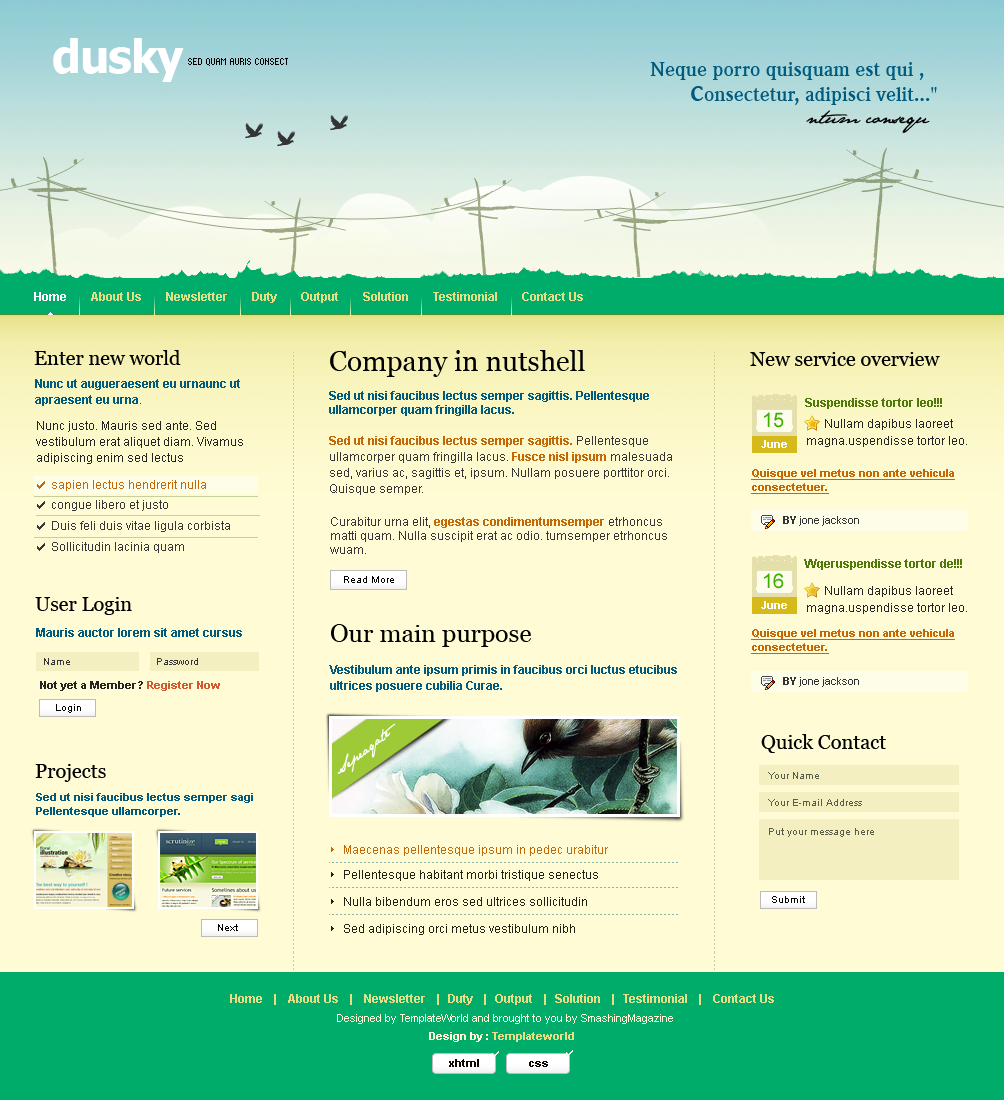
<style>
.page{position:relative;width:1004px;height:1100px;background:#fffcd5}
.page>*{position:absolute;margin:0}
.t1{font:46px "Tahoma-Bold";letter-spacing:-0.025em;color:#ffffff}
.t2{font:8px "Standard0757";color:#000000;text-transform:uppercase}
.t3{font:20px "WeidemannITCbyBT-Bold";color:#005b7f}
.t4{font:30px "WeidemannITCbyBT-Bold";color:#005b7f}
.t5{font:18px "JaneAusten";color:#000000}
.t6{font:12px "Arial-BoldMT";color:#e5df85}
.t7{font:12px "Arial-BoldMT";color:#ffffff}
.t8{font:20px "Georgia";color:#000000}
.t9{font:28px "Georgia";color:#000000}
.t10{font:12px/16px "Arial-BoldMT";color:#005b7f}
.t11{font:12px/16px "ArialMT";color:#005b7f}
.t12{font:12px/14px "Arial-BoldMT";color:#005b7f}
.t13{font:12px "Arial-BoldMT";color:#4f790a}
.t14{font:20px "ArialMT";color:#3bb000}
.t15{font:12px/16px "ArialMT";color:#252525}
.t16{font:12px/17px "ArialMT";color:#252525}
.t17{font:12px/16px "ArialMT";color:#363636}
.t18{font:12px/16px "Arial-BoldMT";color:#c46706}
.t19{font:11px "Arial-BoldMT";color:#ffffff}
.t20{font:11px/14px "Arial-BoldMT";color:#c46706;text-decoration:underline}
.t21{font:12px "ArialMT";color:#c46706}
.t22{font:12px "ArialMT";color:#363636}
.t23{font:12px/14px "ArialMT";color:#363636}
.t24{font:12px/14px "Arial-BoldMT";color:#c46706}
.t25{font:11px "ArialMT";color:#343434}
.t26{font:11px "Arial-BoldMT";color:#343434}
.t27{font:10px "ArialMT";color:#000000}
.t28{font:12px "Arial-BoldMT";color:#005b7f}
.t29{font:25px "Georgia";color:#000000}
.t30{font:10px "ArialMT";color:#363636}
.t31{font:11px "Arial-BoldMT";color:#252525}
.t32{font:11px "Arial-BoldMT";color:#d25930}
.t33{font:13px "JaneAusten";color:#ffffff;font-weight:bold}
.t34{font:10px "ArialMT";color:#585e4c}
.t35{font:11px/14px "Arial-BoldMT";color:#005b7f}
.t36{font:12px "ArialMT";color:#1e2316}
.t37{font:11px "Tahoma-Bold";color:#e5df85}
.t38{font:11px "ArialMT";color:#fffcd5}
.t39{font:11px "Arial-BoldMT";color:#e5df85}
.t40{font:11px "Arial-BoldMT";color:#fffcd5}
.t41{font:11px "Arial-BoldMT";color:#100703}
</style>
<div class="page">
<p class="t1" style="left:53px;top:38px;width:131px;height:44px">dusky</p>
<p class="t2" style="left:188px;top:58px;width:100px;height:8px">sed quam auris consect</p>
<p class="t3" style="left:650px;top:62px;width:274px;height:18px">Neque porro quisquam est qui ,</p>
<p class="t3" style="left:691px;top:86px;width:246px;height:19px"><span class="t4">c</span>onsectetur, adipisci velit..."</p>
<p class="t5" style="left:806px;top:110px;width:124px;height:23px">ntum consequ</p>
<p class="t6" style="left:34px;top:292px;width:549px;height:11px"><span class="t7">Home       </span> About Us        Newsletter        Duty        Output        Solution        Testimonial        Contact Us</p>
<p class="t8" style="left:34px;top:350px;width:147px;height:15px">Enter new world</p>
<p class="t9" style="left:330px;top:350px;width:255px;height:27px">Company in nutshell</p>
<p class="t8" style="left:750px;top:352px;width:190px;height:14px">New service overview</p>
<p class="t10" style="left:35px;top:379px;width:205px;height:27px">Nunc ut augueraesent eu urnaunc ut apraesent eu urna<span class="t11">.</span></p>
<p class="t12" style="left:329px;top:391px;width:320px;height:25px">Sed ut nisi faucibus lectus semper sagittis. Pellentesque ullamcorper quam fringilla lacus.</p>
<p class="t13" style="left:805px;top:398px;width:137px;height:11px">Suspendisse tortor leo!!!</p>
<p class="t14" style="left:764px;top:412px;width:20px;height:16px">15</p>
<p class="t15" style="left:36px;top:421px;width:207px;height:43px">Nunc justo. Mauris sed ante. Sed vestibulum erat aliquet diam. Vivamus adipiscing enim sed lectus</p>
<p class="t16" style="left:807px;top:419px;width:160px;height:28px">Nullam dapibus laoreet magna.uspendisse tortor leo.</p>
<p class="t17" style="left:329px;top:436px;width:343px;height:59px"><span class="t18">Sed ut nisi faucibus lectus semper sagittis.</span> Pellentesque ullamcorper quam fringilla lacus. <span class="t18">Fusce nisl ipsum</span> malesuada sed, varius ac, sagittis et, ipsum. Nullam posuere porttitor orci. Quisque semper.</p>
<p class="t19" style="left:761px;top:440px;width:26px;height:8px">June</p>
<p class="t20" style="left:751px;top:469px;width:204px;height:25px">Quisque vel metus non ante vehicula consectetuer.</p>
<p class="t21" style="left:52px;top:480px;width:154px;height:11px">sapien lectus hendrerit nulla</p>
<p class="t22" style="left:52px;top:500px;width:116px;height:11px">congue libero et justo</p>
<p class="t22" style="left:52px;top:521px;width:178px;height:11px">Duis feli duis vitae ligula corbista</p>
<p class="t23" style="left:330px;top:517px;width:337px;height:37px">Curabitur urna elit, <span class="t24">egestas condimentumsemper</span> etrhoncus matti quam. Nulla suscipit erat ac odio. tumsemper etrhoncus  wuam.</p>
<p class="t25" style="left:783px;top:516px;width:76px;height:10px"><span class="t26">BY </span>jone jackson</p>
<p class="t22" style="left:52px;top:542px;width:132px;height:11px">Sollicitudin lacinia quam</p>
<p class="t13" style="left:804px;top:559px;width:158px;height:11px">Wqeruspendisse tortor de!!!</p>
<p class="t27" style="left:344px;top:576px;width:50px;height:7px">Read More</p>
<p class="t14" style="left:764px;top:573px;width:20px;height:16px">16</p>
<p class="t16" style="left:807px;top:586px;width:160px;height:28px">Nullam dapibus laoreet magna.uspendisse tortor leo.</p>
<p class="t8" style="left:35px;top:597px;width:97px;height:18px">User Login</p>
<p class="t19" style="left:761px;top:601px;width:26px;height:8px">June</p>
<p class="t28" style="left:36px;top:628px;width:206px;height:9px">Mauris auctor lorem sit amet cursus</p>
<p class="t29" style="left:331px;top:624px;width:200px;height:23px">Our main purpose</p>
<p class="t20" style="left:751px;top:629px;width:204px;height:25px">Quisque vel metus non ante vehicula consectetuer.</p>
<p class="t30" style="left:44px;top:658px;width:26px;height:7px">Name</p>
<p class="t30" style="left:157px;top:658px;width:41px;height:7px">Password</p>
<p class="t10" style="left:329px;top:665px;width:348px;height:27px">Vestibulum ante ipsum primis in faucibus orci luctus etucibus ultrices posuere cubilia Curae.</p>
<p class="t25" style="left:783px;top:677px;width:76px;height:10px"><span class="t26">BY </span>jone jackson</p>
<p class="t31" style="left:40px;top:681px;width:180px;height:10px">Not yet a Member?<span class="t32"> Register Now</span></p>
<p class="t27" style="left:56px;top:704px;width:25px;height:9px">Login</p>
<p class="t33" style="left:337px;top:723px;width:59px;height:51px;rotate:-38deg">Sepeaqate</p>
<p class="t8" style="left:761px;top:734px;width:125px;height:19px">Quick Contact</p>
<p class="t8" style="left:35px;top:764px;width:71px;height:18px">Projects</p>
<p class="t34" style="left:768px;top:772px;width:51px;height:7px">Your Name</p>
<p class="t35" style="left:36px;top:793px;width:217px;height:24px">Sed ut nisi faucibus lectus semper sagi<br>Pellentesque ullamcorper.</p>
<p class="t34" style="left:768px;top:799px;width:94px;height:7px">Your E-mail Address</p>
<p class="t34" style="left:769px;top:828px;width:105px;height:9px">Put your message here</p>
<p class="t21" style="left:344px;top:845px;width:264px;height:11px">Maecenas pellentesque ipsum in pedec urabitur</p>
<p class="t36" style="left:344px;top:870px;width:254px;height:11px">Pellentesque habitant morbi tristique senectus</p>
<p class="t36" style="left:344px;top:897px;width:243px;height:9px">Nulla bibendum eros sed ultrices sollicitudin</p>
<p class="t27" style="left:772px;top:896px;width:33px;height:7px">Submit</p>
<p class="t27" style="left:218px;top:924px;width:20px;height:7px">Next</p>
<p class="t36" style="left:344px;top:924px;width:231px;height:11px">Sed adipiscing orci metus vestibulum nibh</p>
<p class="t6" style="left:230px;top:994px;width:544px;height:11px">Home<span class="t37">   |  </span> About Us<span class="t37">   |  </span> Newsletter<span class="t37">   |  </span>Duty<span class="t37">   |  </span>Output<span class="t37">   |  </span>Solution<span class="t37">   |  </span>Testimonial<span class="t37">   |  </span> Contact Us</p>
<p class="t38" style="left:337px;top:1014px;width:336px;height:10px">Designed by TemplateWorld and brought to you by SmashingMagazine</p>
<p class="t39" style="left:429px;top:1032px;width:145px;height:10px"><span class="t40">Design by : </span>Templateworld</p>
<p class="t41" style="left:449px;top:1059px;width:30px;height:8px">xhtml</p>
<p class="t41" style="left:529px;top:1061px;width:19px;height:6px">css</p>
</div>
